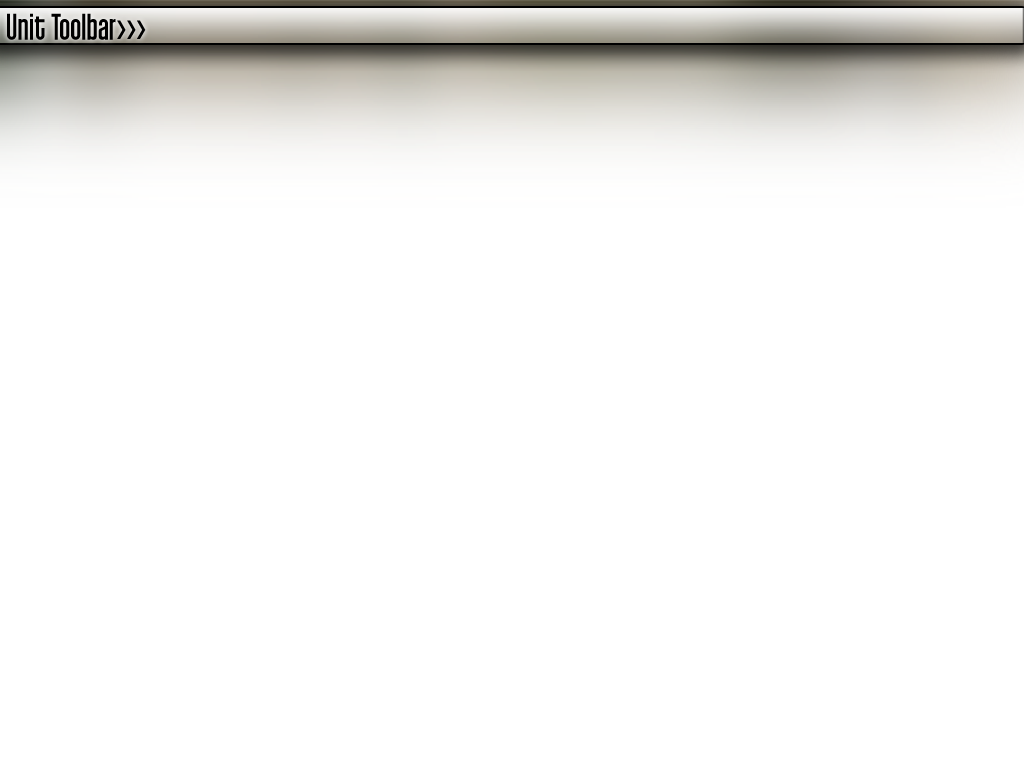
<style>
.page{position:relative;width:1024px;height:768px;background:#ffffff}
.page>*{position:absolute;margin:0}
.t1{font:36px "Qhytsdakx";color:#000000}
</style>
<div class="page">
<p class="t1" style="left:7px;top:13px;width:139px;height:27px">Unit Toolbar&gt;&gt;&gt;</p>
</div>
